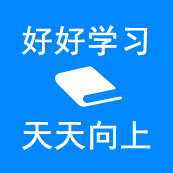
<style>
.page{position:relative;width:173px;height:173px;background:#0087ff}
.page>*{position:absolute;margin:0}
.t1{font:32px "SimHei";color:#ffffff;font-weight:bold}
</style>
<div class="page">
<p class="t1" style="left:21px;top:25px;width:127px;height:31px">好好学习</p>
<p class="t1" style="left:22px;top:120px;width:129px;height:30px">天天向上</p>
</div>
